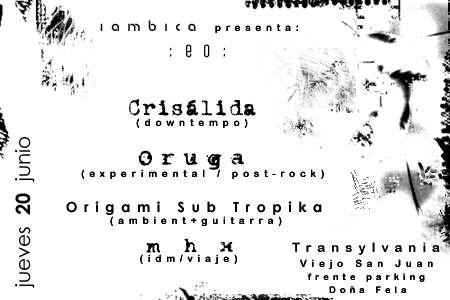
<style>
.page{position:relative;width:450px;height:300px;background:#ffffff}
.page>*{position:absolute;margin:0}
.t1{font:10px "ArialRoundedMTBold";letter-spacing:0.475em;color:#000000}
.t2{font:16px "BabyFace";letter-spacing:0.475em;color:#000000}
.t3{font:24px "Gothikka";letter-spacing:0.475em;color:#000000}
.t4{font:24px "VTCorona";color:#000000}
.t5{font:20px "CenturyGothic";color:#000000}
.t6{font:20px "CenturyGothic-Bold";color:#000000}
.t7{font:20px "SmashTrialVersion";letter-spacing:0.475em;color:#000000}
.t8{font:14px "CenturyGothic-Bold";letter-spacing:0.475em;color:#000000}
.t9{font:18px "SmashTrialVersion";letter-spacing:0.475em;color:#000000}
.t10{font:13px "ArialRoundedMTBold";letter-spacing:0.475em;color:#010101}
.t11{font:9px "ArialRoundedMTBold";letter-spacing:0.475em;color:#010101}
</style>
<div class="page">
<p class="t1" style="left:100px;top:20px;width:198px;height:13px"><span class="t2">iambica </span>presenta:</p>
<p class="t3" style="left:170px;top:44px;width:55px;height:14px">:eo:</p>
<p class="t4" style="left:129px;top:99px;width:127px;height:17px">Crisálida</p>
<p class="t1" style="left:136px;top:118px;width:112px;height:10px">(downtempo)</p>
<p class="t5" style="left:15px;top:137px;width:20px;height:151px;rotate:-90deg">jueves  <span class="t6">20</span>  junio</p>
<p class="t7" style="left:138px;top:150px;width:106px;height:20px">Oruga</p>
<p class="t1" style="left:81px;top:169px;width:243px;height:10px">(experimental / post-rock)</p>
<p class="t8" style="left:66px;top:201px;width:256px;height:14px">Origami Sub Tropika</p>
<p class="t1" style="left:110px;top:216px;width:172px;height:10px">(ambient+guitarra)</p>
<p class="t9" style="left:146px;top:238px;width:87px;height:15px">m h x</p>
<p class="t10" style="left:292px;top:242px;width:148px;height:13px">Transylvania</p>
<p class="t1" style="left:140px;top:254px;width:97px;height:10px">(idm/viaje)</p>
<p class="t1" style="left:300px;top:259px;width:133px;height:10px">Viejo San Juan</p>
<p class="t11" style="left:307px;top:273px;width:118px;height:9px">frente parking</p>
<p class="t11" style="left:329px;top:286px;width:78px;height:7px">Doña Fela</p>
</div>
